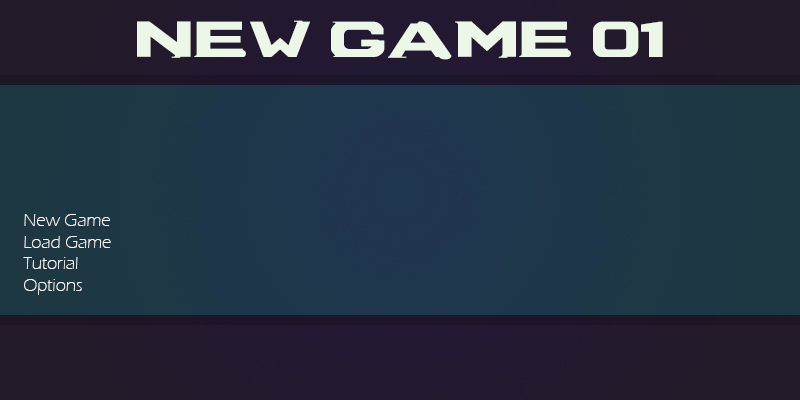
<style>
.page{position:relative;width:800px;height:400px}
.page>*{position:absolute;margin:0}
.t1{font:72px "DeadSpaceTitleFont";color:#edf7e8}
.t2{font:18px "ErasITC-Light";color:#ffffff}
</style>
<div class="page">
<p class="t1" style="left:137px;top:20px;width:526px;height:40px">New Game 01</p>
<p class="t2" style="left:23px;top:214px;width:88px;height:81px">New Game<br>Load Game<br>Tutorial<br>Options</p>
</div>
